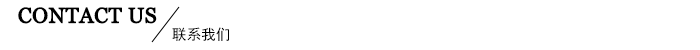
<style>
.page{position:relative;width:700px;height:50px;background:#ffffff}
.page>*{position:absolute;margin:0}
.t1{font:21.3px "Georgia";color:#000000;text-transform:uppercase;font-weight:bold}
.t2{font:14.7px "SimHei";color:#000000}
</style>
<div class="page">
<p class="t1" style="left:18px;top:7px;width:139px;height:17px">contact us</p>
<p class="t2" style="left:172px;top:27px;width:57px;height:14px">联系我们</p>
</div>
